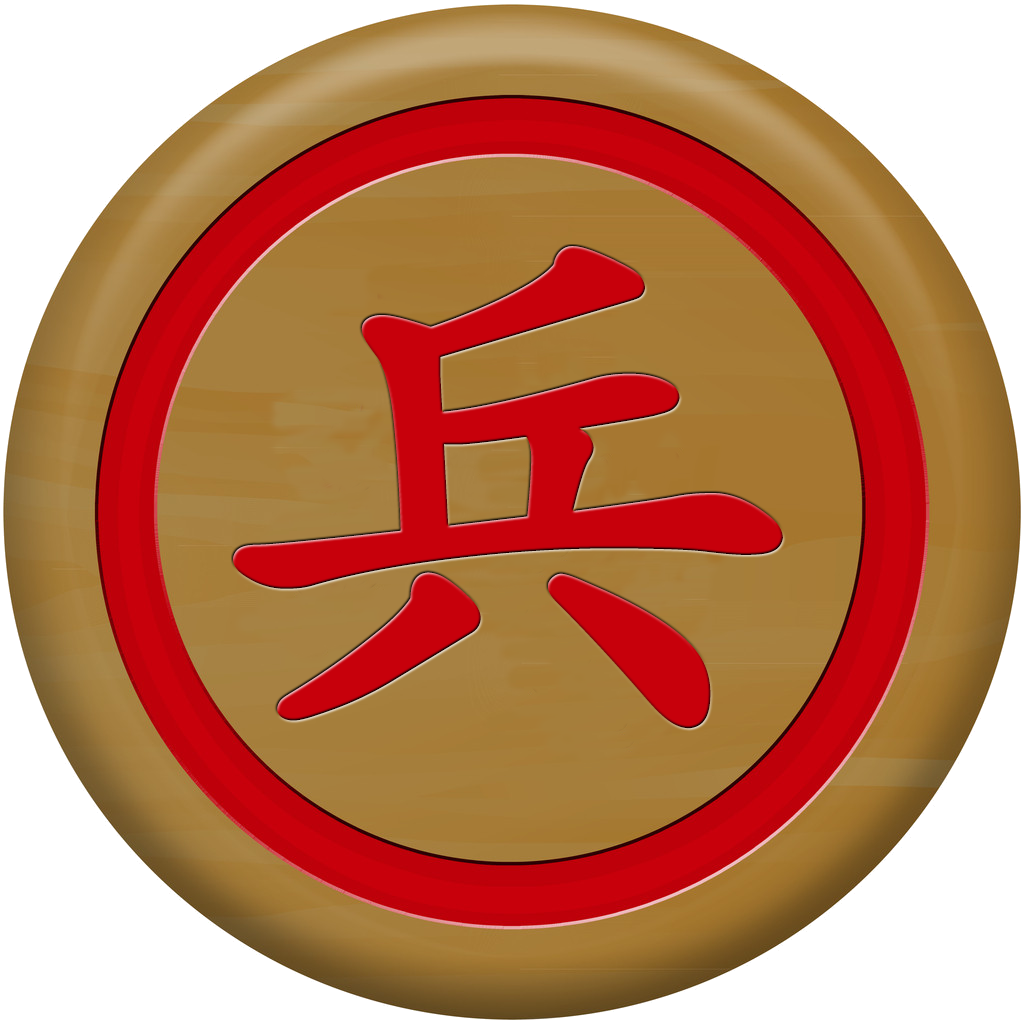
<style>
.page{position:relative;width:1024px;height:1024px;background:#ffffff}
.page>*{position:absolute;margin:0}
.t1{font:593.5px "STKaiti";color:#c7000b;font-weight:bold;scale:1.08 1}
</style>
<div class="page">
<p class="t1" style="left:233px;top:246px;width:550px;height:483px">兵</p>
</div>
